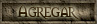
<style>
.page{position:relative;width:97px;height:24px}
.page>*{position:absolute;margin:0}
.t1{font:16px "Morpheus"}
</style>
<div class="page">
<p class="t1" style="left:17px;top:5px;width:63px;height:14px">Agregar</p>
</div>
